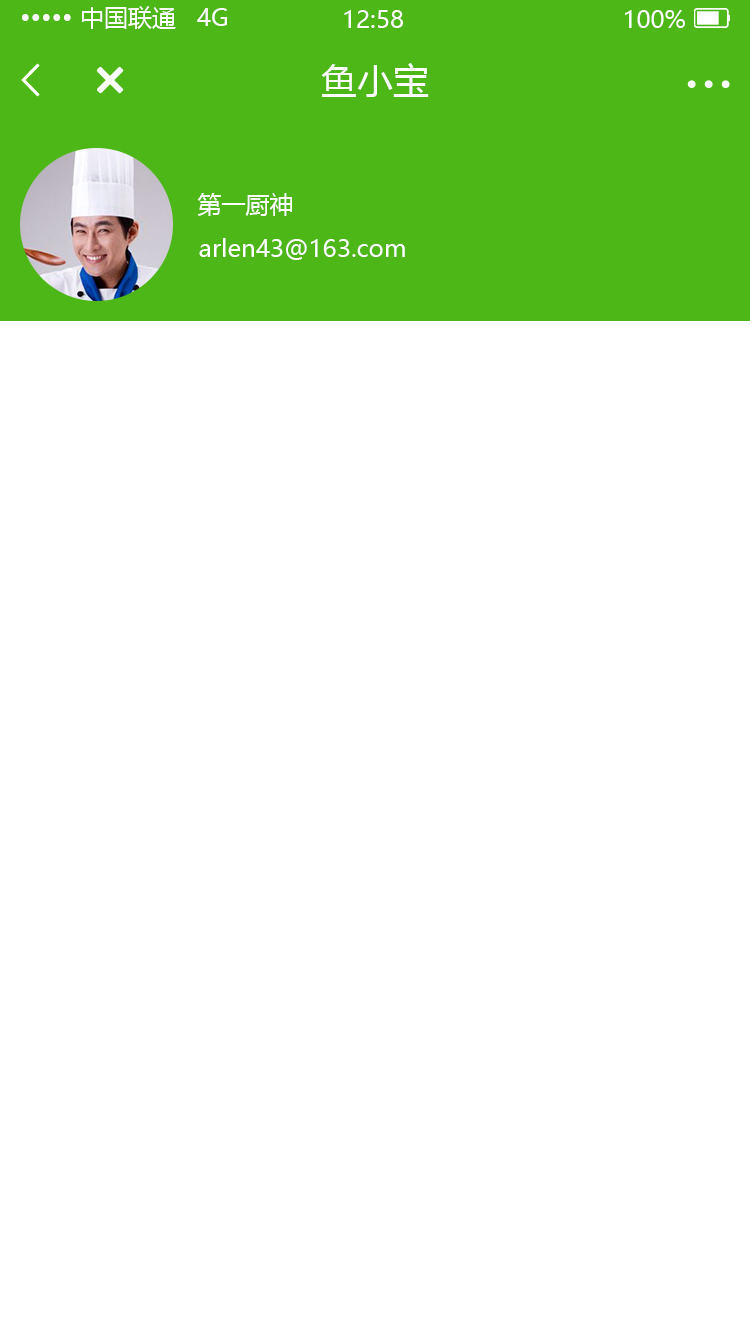
<style>
.page{position:relative;width:750px;height:1334px;background:#ffffff}
.page>*{position:absolute;margin:0}
.t1{font:24px "MicrosoftYaHei";color:#fffefe}
.t2{font:36px "MicrosoftYaHei";color:#fffefe}
.t3{font:24px "MicrosoftYaHei";color:#ffffff}
</style>
<div class="page">
<p class="t1" style="left:22px;top:6px;width:205px;height:23px">••••• 中国联通   4G</p>
<p class="t1" style="left:344px;top:10px;width:59px;height:18px">12:58</p>
<p class="t1" style="left:625px;top:10px;width:60px;height:18px">100%</p>
<p class="t2" style="left:321px;top:63px;width:108px;height:34px">鱼小宝</p>
<p class="t3" style="left:197px;top:193px;width:95px;height:23px">第一厨神</p>
<p class="t3" style="left:199px;top:238px;width:206px;height:22px">arlen43@163.com</p>
</div>
